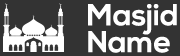
<style>
.page{position:relative;width:180px;height:56px;background:#333333}
.page>*{position:absolute;margin:0}
.t1{font:30.1px/26.9px "NexaBold";color:#ffffff}
</style>
<div class="page">
<p class="t1" style="left:88px;top:4px;width:89px;height:49px">Masjid<br>Name</p>
</div>
